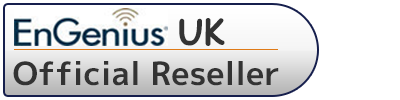
<style>
.page{position:relative;width:400px;height:100px;background:#ffffff}
.page>*{position:absolute;margin:0}
.t1{font:35px "ComicSansMS-Bold";color:#333333}
.t2{font:32px "mplus-1p-bold";color:#333333}
</style>
<div class="page">
<p class="t1" style="left:179px;top:18px;width:46px;height:28px">UK</p>
<p class="t2" style="left:13px;top:61px;width:266px;height:25px">Official Reseller</p>
</div>
